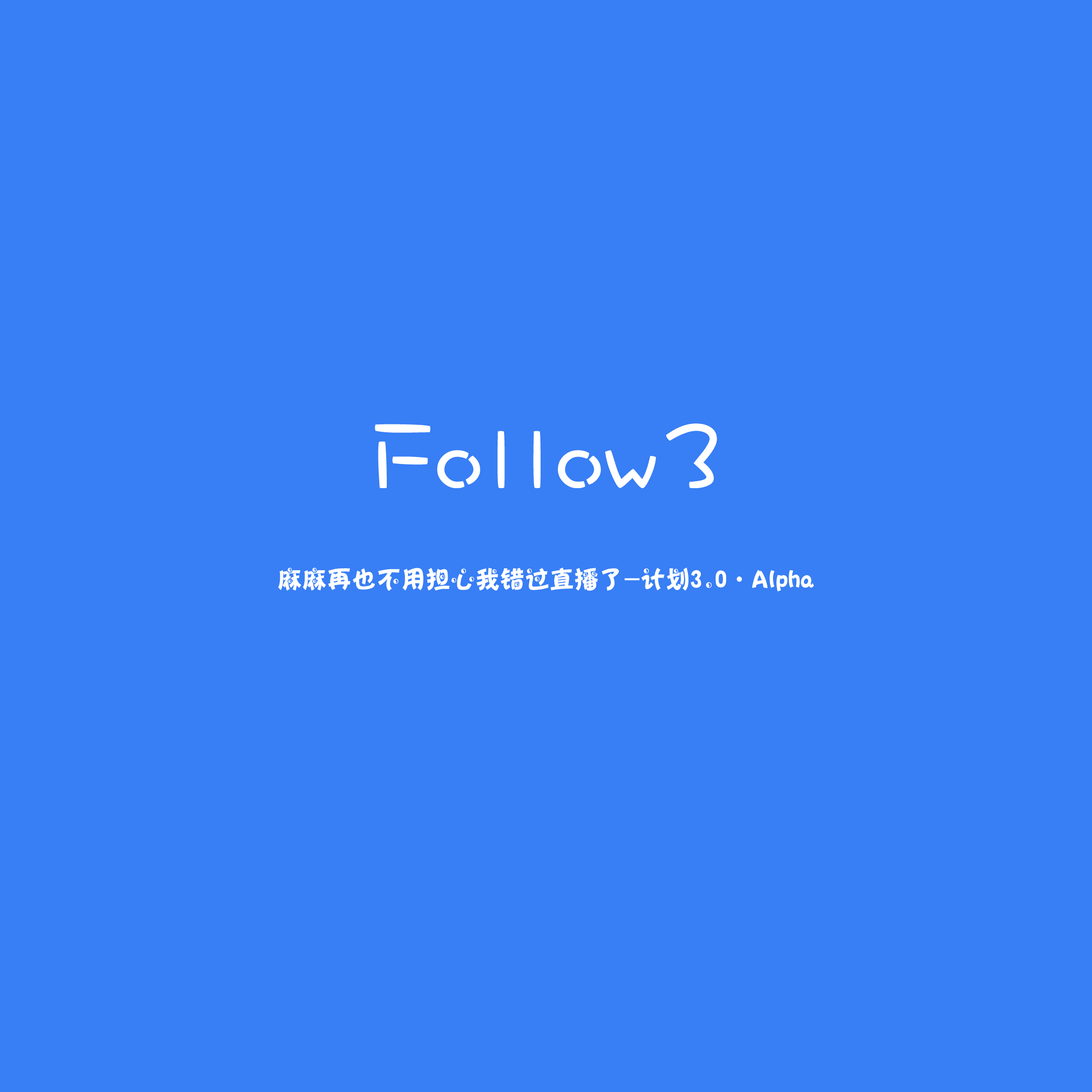
<style>
.page{position:relative;width:1092px;height:1092px;background:#387ef5}
.page>*{position:absolute;margin:0}
.t1{font:100.4px "DFPWaWaW5";color:#ffffff}
.t2{font:24.7px "HYo3gj";color:#ffffff}
</style>
<div class="page">
<p class="t1" style="left:375px;top:423px;width:342px;height:65px">Follow3</p>
<p class="t2" style="left:278px;top:567px;width:536px;height:24px">麻麻再也不用担心我错过直播了-计划3.0·Alpha</p>
</div>
